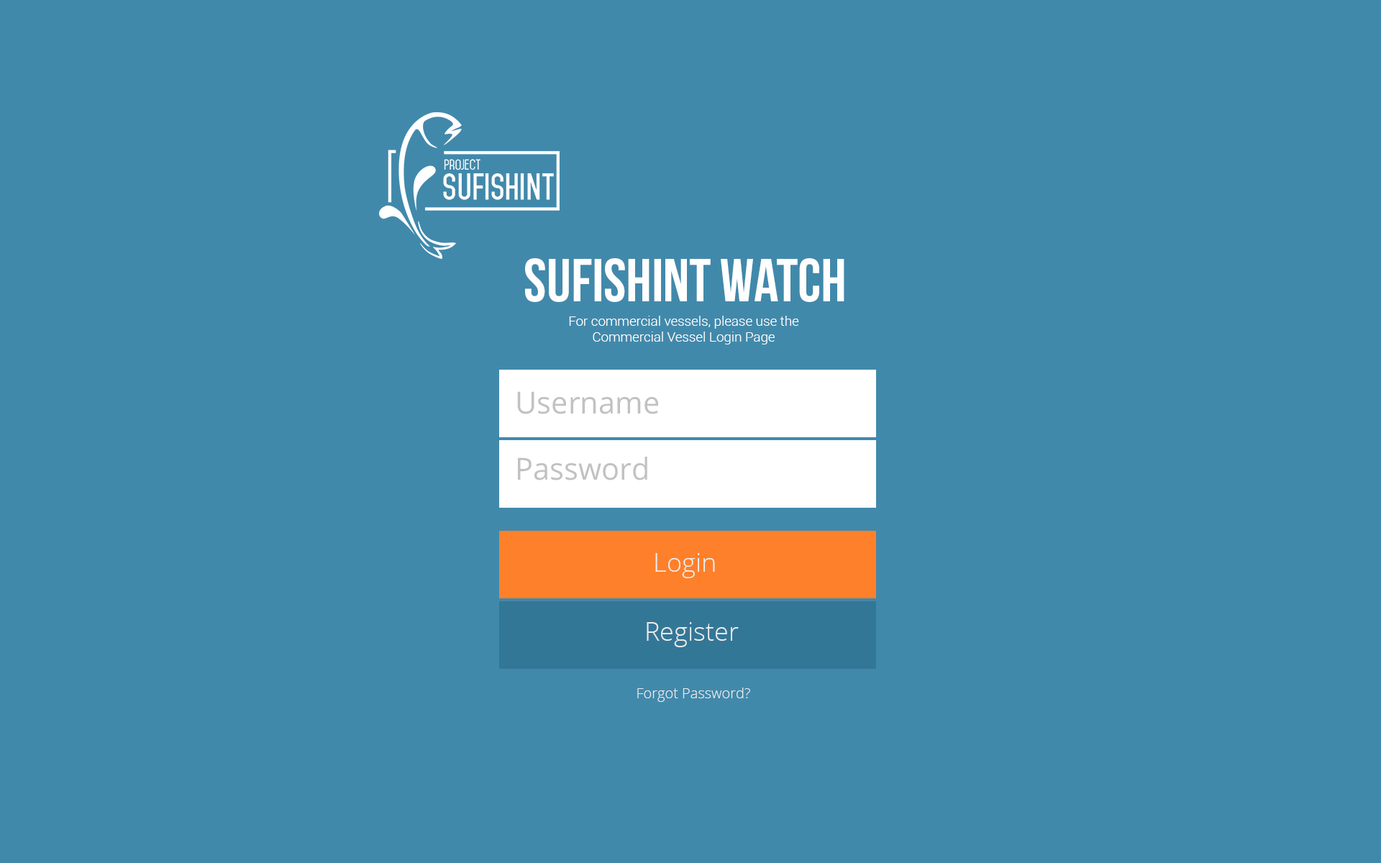
<style>
.page{position:relative;width:1381px;height:863px;background:#4189ab}
.page>*{position:absolute;margin:0}
.t1{font:60.2px "BebasNeue";color:#ffffff}
.t2{font:13.6px/15.4px "Roboto-Light";color:#ffffff}
.t3{font:30.4px "OpenSans";color:#c1c1c1}
.t4{font:25.9px "OpenSans-Light";color:#ebebeb}
.t5{font:14.4px "OpenSans-Light";color:#ebebeb}
</style>
<div class="page">
<p class="t1" style="left:525px;top:258px;width:320px;height:44px">SUFISHINT WATCH</p>
<p class="t2" style="left:569px;top:316px;width:230px;height:29px;text-align:center">For commercial vessels, please use the <br>Commercial Vessel Login Page</p>
<p class="t3" style="left:517px;top:391px;width:141px;height:23px">Username</p>
<p class="t3" style="left:518px;top:457px;width:129px;height:24px">Password</p>
<p class="t4" style="left:655px;top:553px;width:60px;height:25px">Login</p>
<p class="t4" style="left:647px;top:622px;width:92px;height:25px">Register</p>
<p class="t5" style="left:637px;top:688px;width:113px;height:14px">Forgot Password?</p>
</div>
